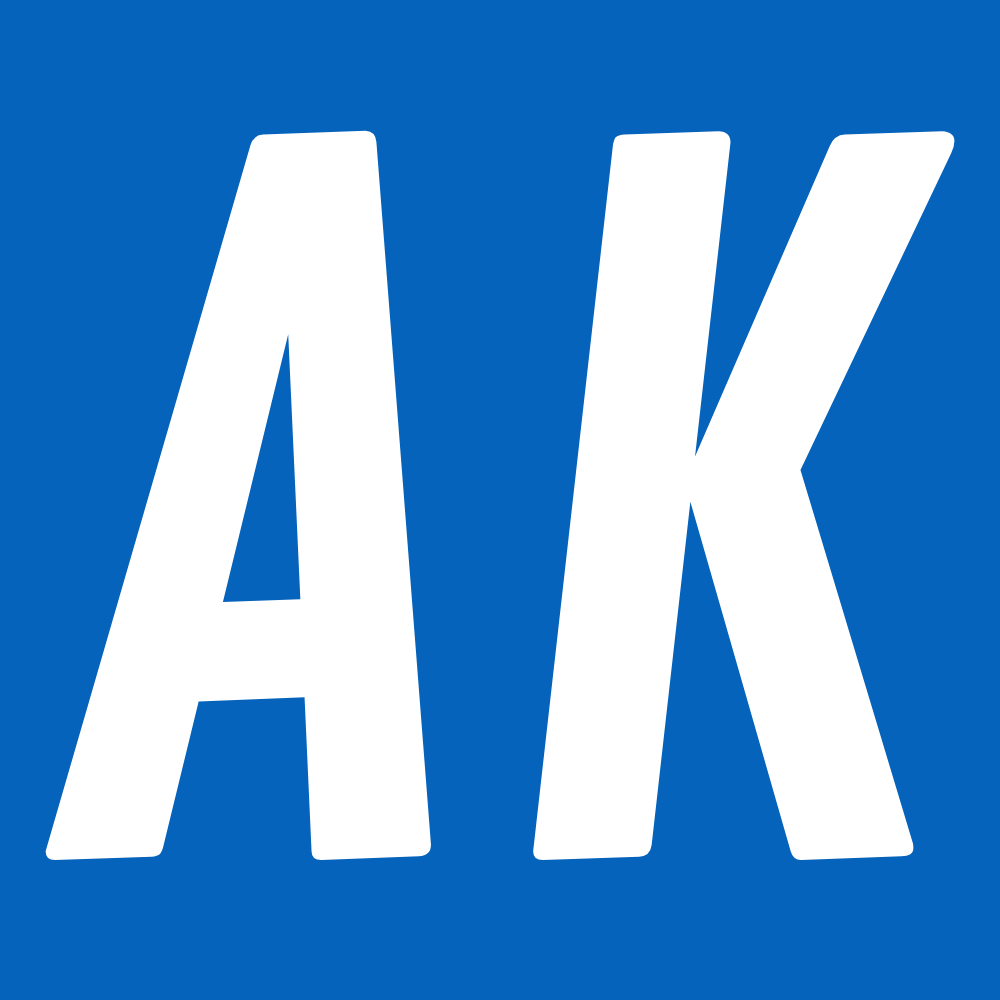
<style>
.page{position:relative;width:1000px;height:1000px;background:#0563bb}
.page>*{position:absolute;margin:0}
.t1{font:955.5px "ContrailOne-Regular";color:#ffffff}
</style>
<div class="page">
<p class="t1" style="left:45px;top:130px;width:910px;height:731px">AK</p>
</div>
